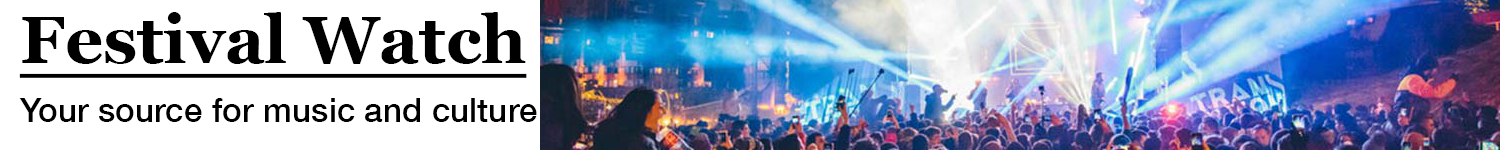
<style>
.page{position:relative;width:1500px;height:150px;background:#ffffff}
.page>*{position:absolute;margin:0}
.t1{font:66.7px "Georgia-Bold";color:#000000;text-decoration:underline}
.t2{font:33.3px "HelveticaNeue-Medium";color:#000000}
</style>
<div class="page">
<p class="t1" style="left:19px;top:12px;width:508px;height:66px">Festival Watch</p>
<p class="t2" style="left:19px;top:98px;width:518px;height:24px">Your source for music and culture</p>
</div>
